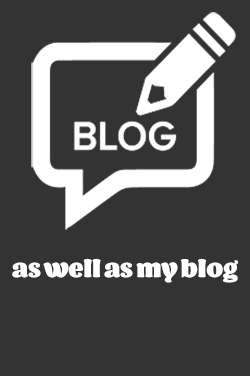
<style>
.page{position:relative;width:250px;height:376px;background:#333333}
.page>*{position:absolute;margin:0}
.t1{font:25px "BarricadaPro";color:#ffffff}
</style>
<div class="page">
<p class="t1" style="left:12px;top:258px;width:226px;height:25px">as well as my blog</p>
</div>
